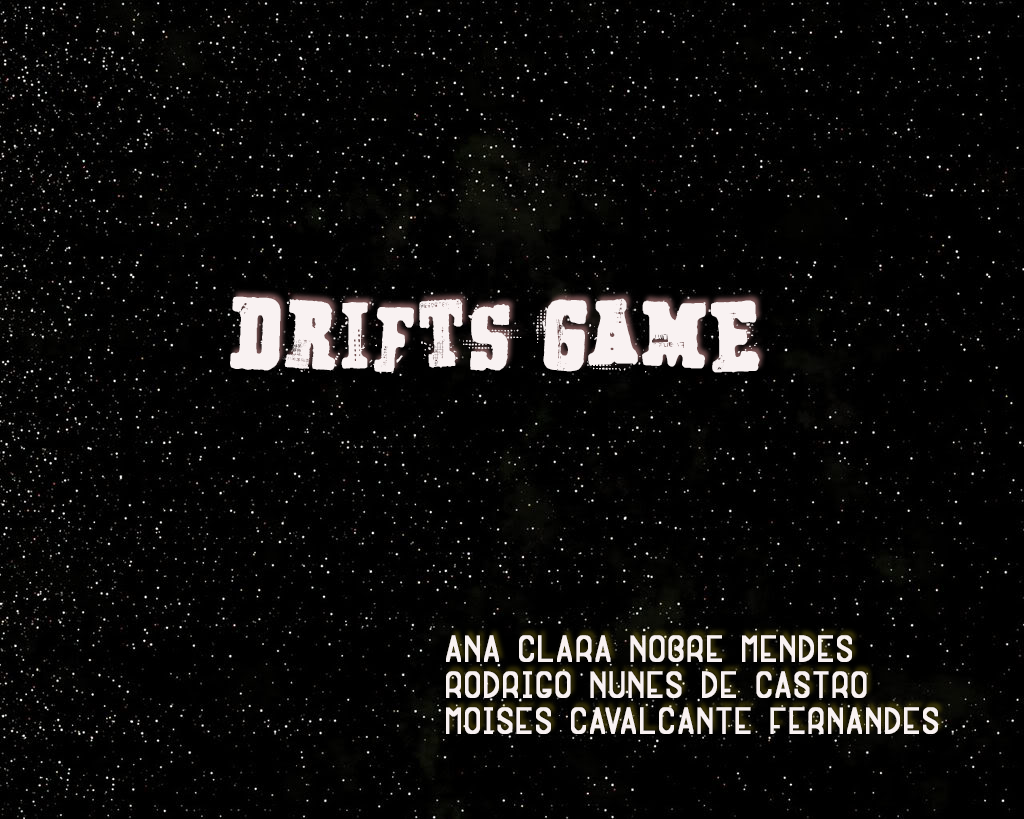
<style>
.page{position:relative;width:1024px;height:819px;background:#000000}
.page>*{position:absolute;margin:0}
.t1{font:72px "SecretAgency";color:#f9f2f2}
.t2{font:30px "ExtragnaRaraSt";color:#f9f2f2}
</style>
<div class="page">
<p class="t1" style="left:230px;top:296px;width:530px;height:91px">DRIFTS GAME</p>
<p class="t2" style="left:446px;top:635px;width:492px;height:99px">ANA CLARA NOBRE MENDES<br>RODRIGO NUNES de CASTRO<br>MOISes cavalcante fernandes</p>
</div>
